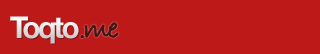
<style>
.page{position:relative;width:320px;height:54px;background:#be1919}
.page>*{position:absolute;margin:0}
.t1{font:30px "HelveticaNeue-Bold";letter-spacing:-0.09em;color:#e4e3e3}
.t2{font:30px "BradleyHandITCTTBold";letter-spacing:-0.09em;color:#461717}
</style>
<div class="page">
<p class="t1" style="left:10px;top:16px;width:69px;height:28px">Toqto</p>
<p class="t2" style="left:80px;top:22px;width:39px;height:17px;rotate:-3deg">.me</p>
</div>
